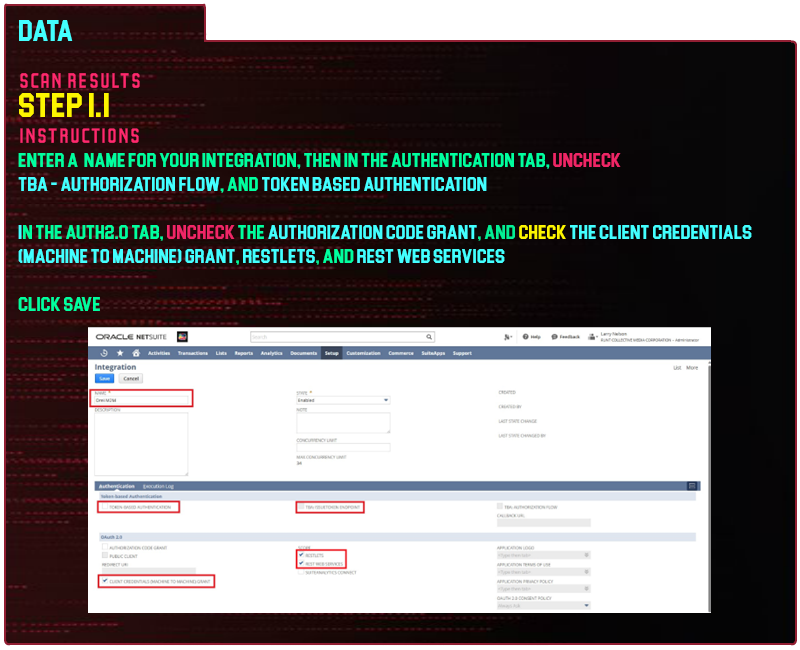
<style>
.page{position:relative;width:800px;height:650px;background:#ffffff}
.page>*{position:absolute;margin:0}
.t1{font:30px "Blockletter";color:#43ffff}
.t2{font:35px "Party-Lights-[WLM]-Flat";color:#ff296d}
.t3{font:35px "Blockletter";color:#fdf500}
.t4{font:20px "Blockletter";color:#00ff9f}
.t5{font:20px "Blockletter";color:#ef2666}
.t6{font:20px "Blockletter";color:#43ffff}
.t7{font:20px "Blockletter";color:#03ee94}
.t8{font:20px "Blockletter";color:#fdf500}
.t9{font:20px "Blockletter";color:#02ef95}
</style>
<div class="page">
<p class="t1" style="left:19px;top:20px;width:54px;height:21px">Data</p>
<p class="t2" style="left:20px;top:73px;width:120px;height:15px">Scan REsults</p>
<p class="t3" style="left:19px;top:93px;width:90px;height:24px">Step 1.1</p>
<p class="t2" style="left:20px;top:128px;width:119px;height:15px">instructions</p>
<p class="t4" style="left:18px;top:153px;width:734px;height:158px">enter a  name for your integration, then in the authentication tab, <span class="t5">uncheck <br></span><span class="t6">TBA - Authorization flow</span>, and <span class="t6">token based authentication<br><br>i</span>n the auth2.0 tab, <span class="t5">uncheck</span> the<span class="t6"> authorization code grant</span><span class="t7">, and </span><span class="t8">check </span><span class="t6">the client credentials (machine to machine) grant</span>,<span class="t6"> Restlets</span><span class="t9">, </span>and<span class="t6"> rest web services<br><br></span>click save</p>
</div>
